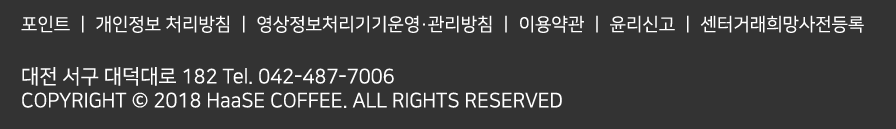
<style>
.page{position:relative;width:896px;height:129px;background:#333333}
.page>*{position:absolute;margin:0}
.t1{font:20px "NanumSquareR";color:#ffffff}
.t2{font:18px "NanumSquareR";color:#ffffff}
</style>
<div class="page">
<p class="t1" style="left:21px;top:15px;width:843px;height:93px"><span class="t2">포인트 ㅣ 개인정보 처리방침 ㅣ 영상정보처리기기운영·관리방침 ㅣ 이용약관 ㅣ 윤리신고 ㅣ 센터거래희망사전등록<br><br></span>대전 서구 대덕대로 182 Tel. 042-487-7006<br>COPYRIGHT © 2018 HaaSE COFFEE. ALL RIGHTS RESERVED</p>
</div>
